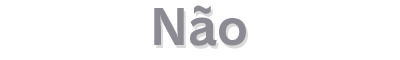
<style>
.page{position:relative;width:400px;height:60px;background:#ffffff}
.page>*{position:absolute;margin:0}
.t1{font:48px "RodinPro-B";color:#8c8b93}
</style>
<div class="page">
<p class="t1" style="left:154px;top:5px;width:92px;height:41px">Não</p>
</div>
